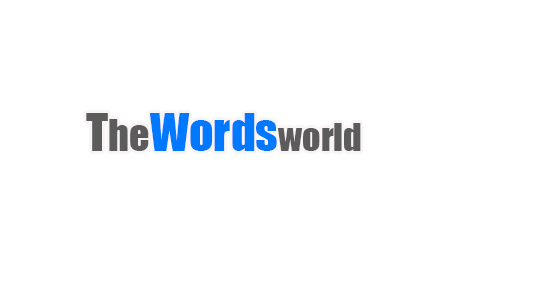
<style>
.page{position:relative;width:550px;height:300px;background:#ffffff}
.page>*{position:absolute;margin:0}
.t1{font:48px "Impact";color:#0078ff}
.t2{font:48px "Impact";color:#5c5c5c}
.t3{font:40px "Impact";color:#5c5c5c}
.t4{font:36px "Impact";color:#5c5c5c}
</style>
<div class="page">
<p class="t1" style="left:86px;top:113px;width:275px;height:38px"><span class="t2">T</span><span class="t3">he</span>Words<span class="t4">world</span></p>
</div>
